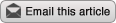
<style>
.page{position:relative;width:116px;height:23px}
.page>*{position:absolute;margin:0}
.t1{font:11px "Helvetica";color:#111111;font-weight:bold}
</style>
<div class="page">
<p class="t1" style="left:26px;top:7px;width:84px;height:9px">Email this article</p>
</div>
